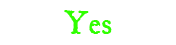
<style>
.page{position:relative;width:176px;height:45px;background:#ffffff}
.page>*{position:absolute;margin:0}
.t1{font:36px "JSL-Ancient";color:#30ff00}
</style>
<div class="page">
<p class="t1" style="left:64px;top:10px;width:48px;height:24px">Yes</p>
</div>
